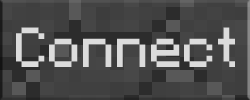
<style>
.page{position:relative;width:250px;height:100px}
.page>*{position:absolute;margin:0}
.t1{font:45px "Minecraftia";color:#dcdcdc}
</style>
<div class="page">
<p class="t1" style="left:16px;top:27px;width:219px;height:40px">Connect</p>
</div>
